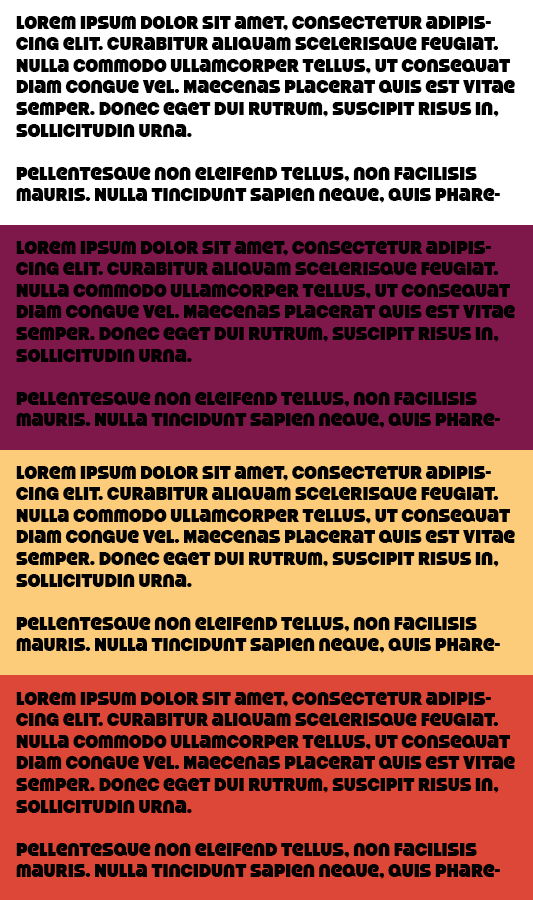
<style>
.page{position:relative;width:533px;height:900px;background:#000000}
.page>*{position:absolute;margin:0}
.t1{font:18px "StrenuousBl-Regular";color:#000000}
</style>
<div class="page">
<p class="t1" style="left:16px;top:16px;width:499px;height:187px">Lorem ipsum dolor sit amet, consectetur adipiscing elit. Curabitur aliquam scelerisque feugiat. Nulla commodo ullamcorper tellus, ut consequat diam congue vel. Maecenas placerat quis est vitae semper. Donec eget dui rutrum, suscipit risus in, sollicitudin urna.<br><br>Pellentesque non eleifend tellus, non facilisis mauris. Nulla tincidunt sapien neque, quis pharetra magna posuere id. Aenean euismod odio placerat, dignissim lacus vel, efficitur nibh. Fusce nisl arcu, hendrerit non eros ac, tempor porttitor ex.</p>
<p class="t1" style="left:16px;top:241px;width:499px;height:187px">Lorem ipsum dolor sit amet, consectetur adipiscing elit. Curabitur aliquam scelerisque feugiat. Nulla commodo ullamcorper tellus, ut consequat diam congue vel. Maecenas placerat quis est vitae semper. Donec eget dui rutrum, suscipit risus in, sollicitudin urna.<br><br>Pellentesque non eleifend tellus, non facilisis mauris. Nulla tincidunt sapien neque, quis pharetra magna posuere id. Aenean euismod odio placerat, dignissim lacus vel, efficitur nibh. Fusce nisl arcu, hendrerit non eros ac, tempor porttitor ex.</p>
<p class="t1" style="left:16px;top:466px;width:499px;height:187px">Lorem ipsum dolor sit amet, consectetur adipiscing elit. Curabitur aliquam scelerisque feugiat. Nulla commodo ullamcorper tellus, ut consequat diam congue vel. Maecenas placerat quis est vitae semper. Donec eget dui rutrum, suscipit risus in, sollicitudin urna.<br><br>Pellentesque non eleifend tellus, non facilisis mauris. Nulla tincidunt sapien neque, quis pharetra magna posuere id. Aenean euismod odio placerat, dignissim lacus vel, efficitur nibh. Fusce nisl arcu, hendrerit non eros ac, tempor porttitor ex.</p>
<p class="t1" style="left:16px;top:692px;width:499px;height:187px">Lorem ipsum dolor sit amet, consectetur adipiscing elit. Curabitur aliquam scelerisque feugiat. Nulla commodo ullamcorper tellus, ut consequat diam congue vel. Maecenas placerat quis est vitae semper. Donec eget dui rutrum, suscipit risus in, sollicitudin urna.<br><br>Pellentesque non eleifend tellus, non facilisis mauris. Nulla tincidunt sapien neque, quis pharetra magna posuere id. Aenean euismod odio placerat, dignissim lacus vel, efficitur nibh. Fusce nisl arcu, hendrerit non eros ac, tempor porttitor ex.</p>
</div>
